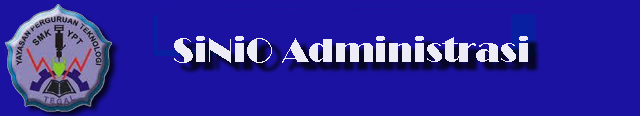
<style>
.page{position:relative;width:640px;height:116px;background:#1b12a1}
.page>*{position:absolute;margin:0}
.t1{font:34.6px "Broadway";color:#edecf6}
</style>
<div class="page">
<p class="t1" style="left:174px;top:36px;width:354px;height:27px">SiNiO Administrasi</p>
</div>
